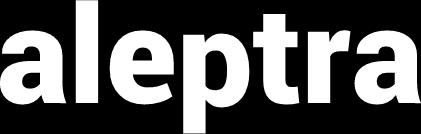
<style>
.page{position:relative;width:421px;height:134px;background:#000000}
.page>*{position:absolute;margin:0}
.t1{font:150px "Yantramanav-Black";color:#ffffff}
</style>
<div class="page">
<p class="t1" style="left:0px;top:0px;width:421px;height:134px">aleptra</p>
</div>
